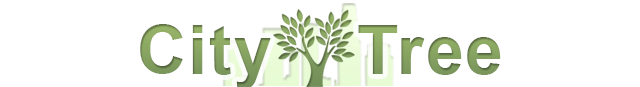
<style>
.page{position:relative;width:640px;height:87px;background:#ffffff}
.page>*{position:absolute;margin:0}
.t1{font:68px "Arial-BoldMT";letter-spacing:0.03em;color:#839e5e}
</style>
<div class="page">
<p class="t1" style="left:140px;top:24px;width:361px;height:65px">City    Tree</p>
</div>
